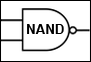
<style>
.page{position:relative;width:91px;height:62px;background:#ffffff}
.page>*{position:absolute;margin:0}
.t1{font:13.3px "Arial-BoldMT";color:#000000}
</style>
<div class="page">
<p class="t1" style="left:27px;top:24px;width:37px;height:10px">NAND</p>
</div>
